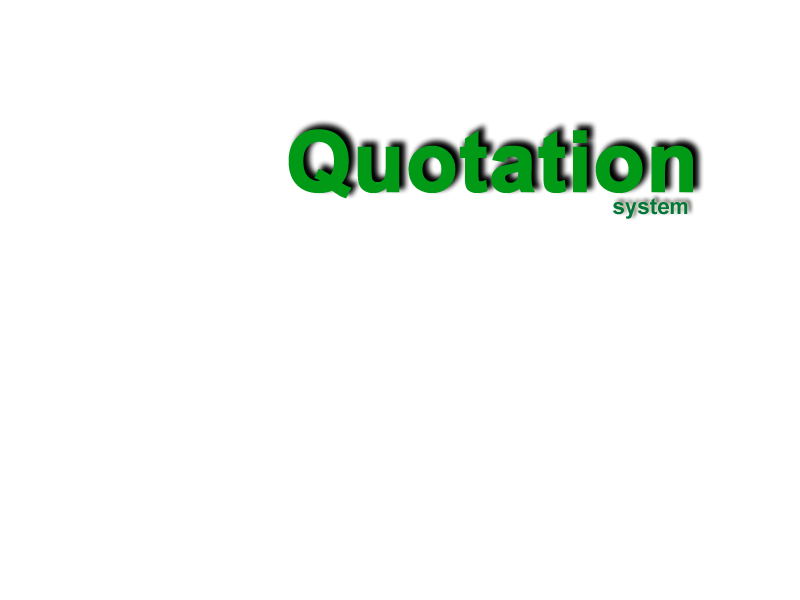
<style>
.page{position:relative;width:800px;height:600px;background:#ffffff}
.page>*{position:absolute;margin:0}
.t1{font:83.3px "Arial-BoldMT";color:#009a16;font-weight:bold}
.t2{font:22.2px "Arial-BoldMT";color:#02763e}
</style>
<div class="page">
<p class="t1" style="left:288px;top:129px;width:405px;height:70px">Quotation</p>
<p class="t2" style="left:613px;top:198px;width:75px;height:21px">system</p>
</div>
